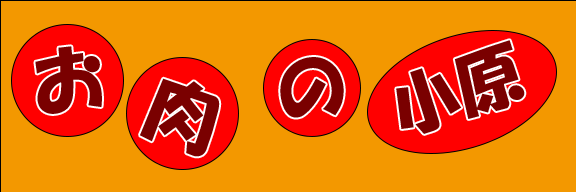
<style>
.page{position:relative;width:576px;height:192px;background:#f39800}
.page>*{position:absolute;margin:0}
.t1{font:66.8px "HGPSoeiKakupoptai";color:#7a0000}
.t2{font:74.3px "HGPSoeiKakupoptai";color:#7a0000}
</style>
<div class="page">
<p class="t1" style="left:396px;top:40px;width:129px;height:94px;rotate:-18deg">小原</p>
<p class="t2" style="left:35px;top:46px;width:67px;height:68px;rotate:-7deg">お</p>
<p class="t2" style="left:280px;top:57px;width:64px;height:61px;rotate:-12deg">の</p>
<p class="t2" style="left:140px;top:78px;width:80px;height:79px;rotate:19deg">肉</p>
</div>
